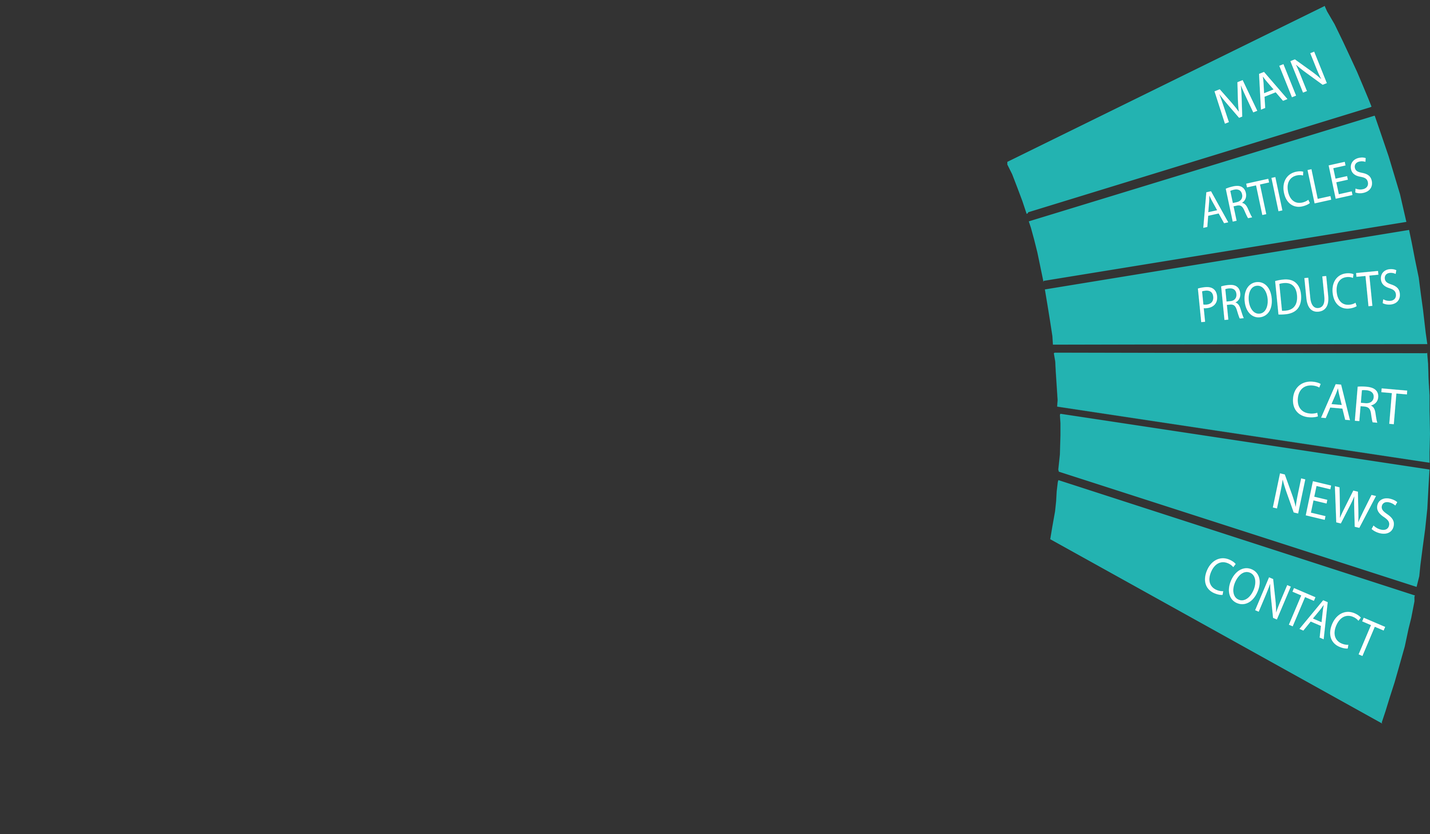
<style>
.page{position:relative;width:1430px;height:834px;background:#333333}
.page>*{position:absolute;margin:0}
.t1{font:12.1px "MyriadPro-Regular";color:#ffffff}
.t2{font:50.5px "MyriadPro-Regular";color:#ffffff;scale:0.89 1}
.t3{font:50.7px "MyriadPro-Regular";color:#ffffff;scale:0.87 1}
.t4{font:51.4px "MyriadPro-Regular";color:#ffffff}
.t5{font:51.7px "MyriadPro-Regular";color:#ffffff}
.t6{font:52.9px "MyriadPro-Regular";color:#ffffff;scale:0.88 1}
</style>
<div class="page">
<p class="t1" style="left:1214px;top:51px;width:113px;height:73px;rotate:-22deg">MAIN</p>
<p class="t2" style="left:1203px;top:157px;width:169px;height:71px;rotate:-13deg">ARTICLES</p>
<p class="t3" style="left:1197px;top:269px;width:203px;height:53px;rotate:-5deg">PRODUCTS</p>
<p class="t4" style="left:1292px;top:381px;width:115px;height:43px;rotate:5deg">CART</p>
<p class="t5" style="left:1272px;top:473px;width:125px;height:61px;rotate:13deg">NEWS</p>
<p class="t6" style="left:1204px;top:558px;width:181px;height:98px;rotate:23deg">CONTACT</p>
</div>
